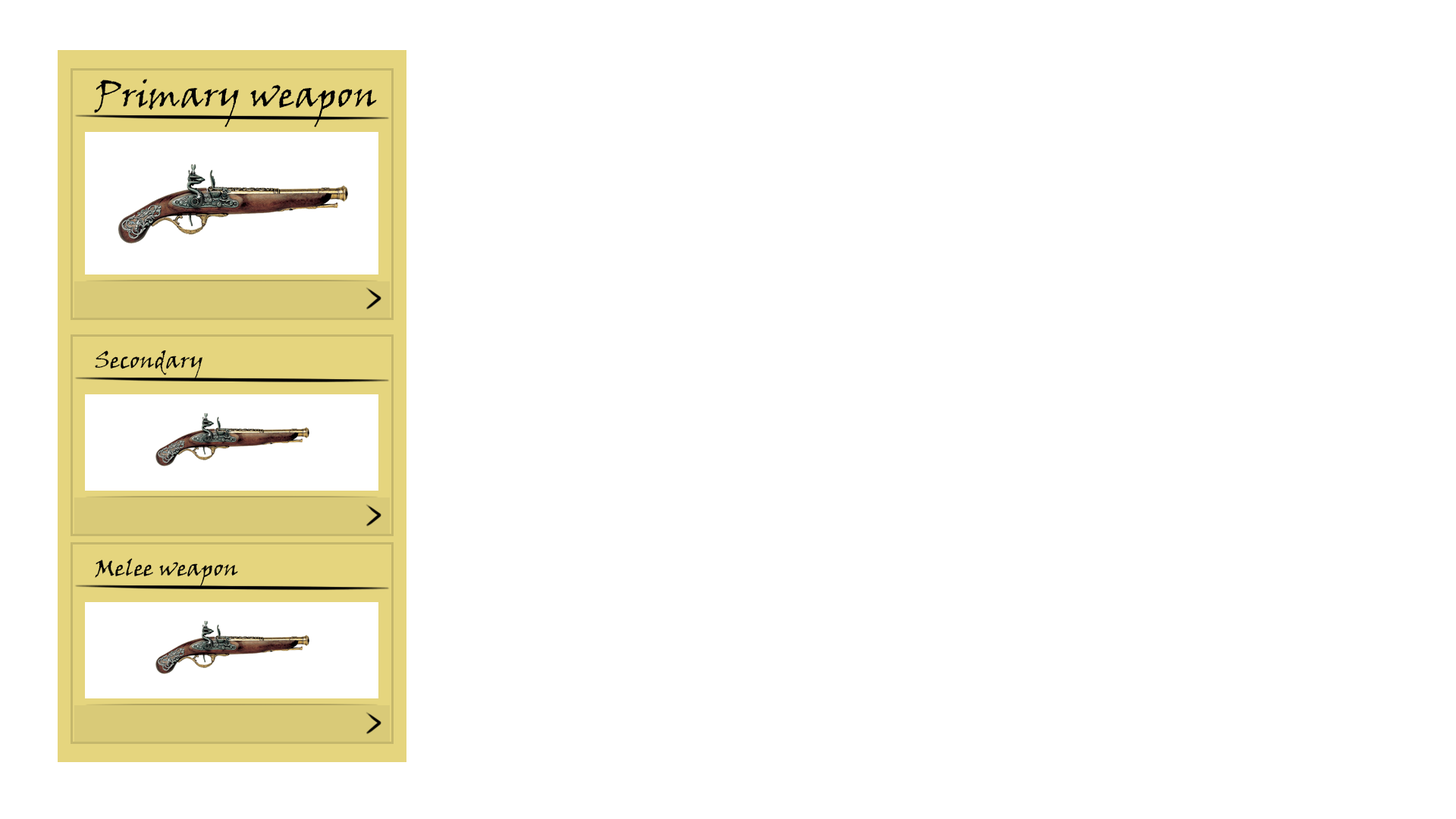
<style>
.page{position:relative;width:1456px;height:819px;background:#ffffff}
.page>*{position:absolute;margin:0}
.t1{font:36.4px "VinerHandITC";color:#000000}
.t2{font:22.7px "VinerHandITC";color:#000000}
</style>
<div class="page">
<p class="t1" style="left:94px;top:79px;width:283px;height:48px">Primary weapon</p>
<p class="t2" style="left:95px;top:350px;width:107px;height:31px">Secondary</p>
<p class="t2" style="left:95px;top:558px;width:143px;height:30px">Melee weapon</p>
</div>
